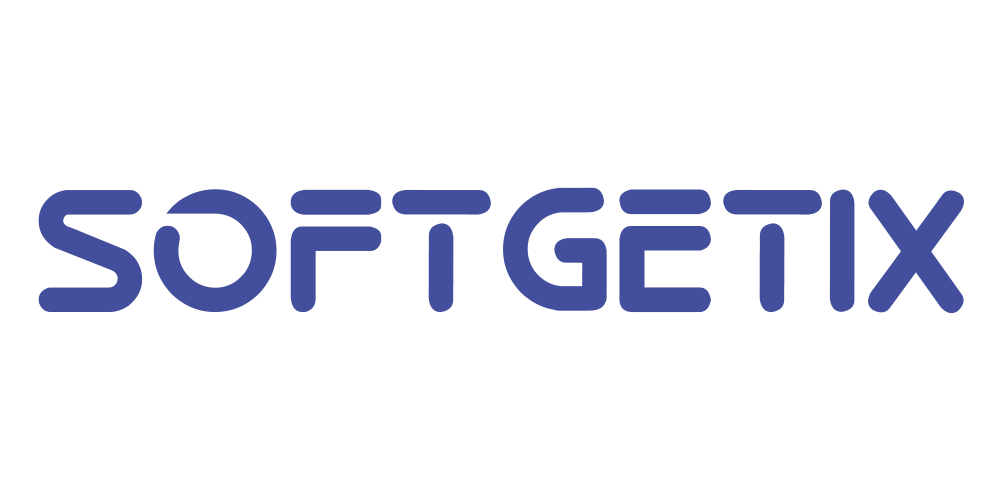
<style>
.page{position:relative;width:1000px;height:500px;background:#ffffff}
.page>*{position:absolute;margin:0}
.t1{font:175px "DressedlessRegular";letter-spacing:0.025em;color:#434f9c}
</style>
<div class="page">
<p class="t1" style="left:38px;top:187px;width:926px;height:127px">softgetix</p>
</div>
